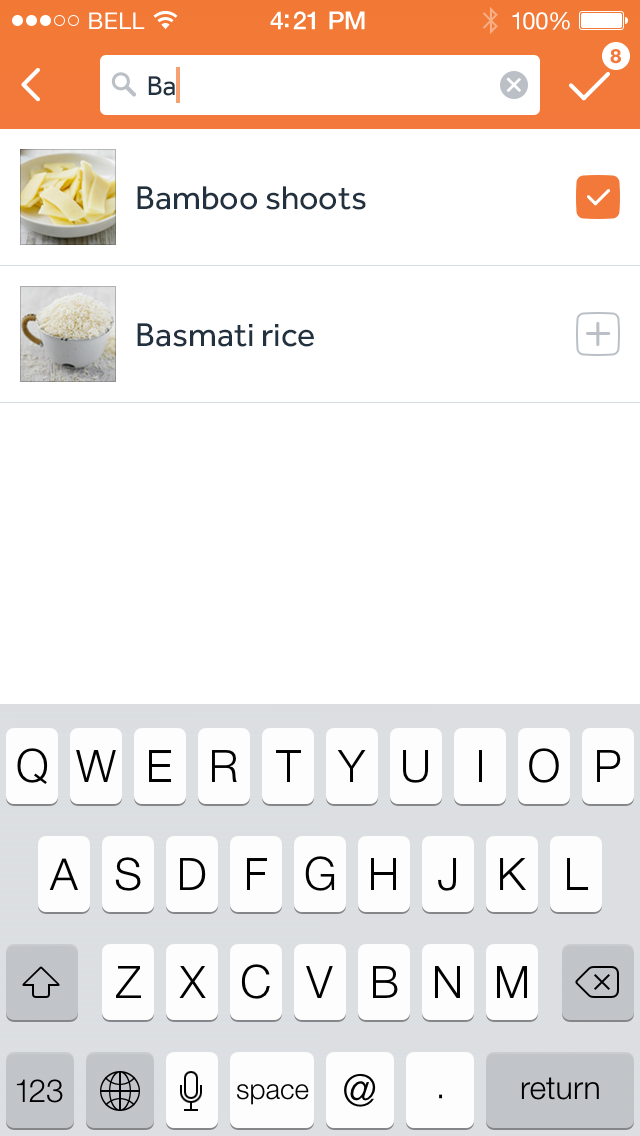
<style>
.page{position:relative;width:640px;height:1136px;background:#ffffff}
.page>*{position:absolute;margin:0}
.t1{font:23px "HelveticaNeue";letter-spacing:0.02em;color:#ffffff}
.t2{font:25px "HelveticaNeue-Medium";letter-spacing:-0.02em;color:#ffffff}
.t3{font:24px "HelveticaNeue";letter-spacing:-0.02em;color:#ffffff}
.t4{font:20px "Gibson-SemiBold";color:#f27939}
.t5{font:28px "Effra-Regular";color:#22313f}
.t6{font:34px "Effra-Regular"}
.t7{font:34px "Effra-Regular";color:#22313f}
</style>
<div class="page">
<p class="t1" style="left:89px;top:12px;width:56px;height:17px">BELL</p>
<p class="t2" style="left:270px;top:11px;width:95px;height:19px">4:21 PM</p>
<p class="t3" style="left:512px;top:12px;width:58px;height:18px">100%</p>
<p class="t4" style="left:610px;top:49px;width:11px;height:15px">8</p>
<p class="t5" style="left:148px;top:76px;width:27px;height:20px">Ba</p>
<p class="t6" style="left:135px;top:186px;width:154px;height:31px">Asparagus</p>
<p class="t7" style="left:137px;top:186px;width:229px;height:24px">Bamboo shoots</p>
<p class="t7" style="left:137px;top:323px;width:177px;height:24px">Basmati rice</p>
</div>
